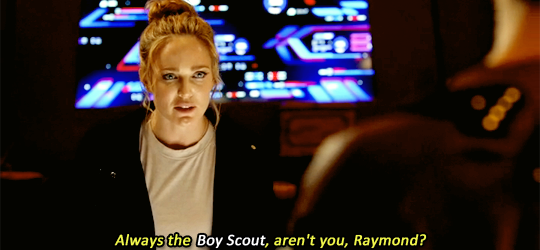
<style>
.page{position:relative;width:540px;height:250px;background:#040400}
.page>*{position:absolute;margin:0}
.t1{font:16px "Calibri";color:#f1f74b;font-weight:bold;font-style:italic}
.t2{font:16px "Calibri";color:#ffffff;font-weight:bold;font-style:italic}
</style>
<div class="page">
<p class="t1" style="left:114px;top:233px;width:313px;height:16px">Always the  <span class="t2">Boy Scout</span>, aren't you, Raymond?</p>
</div>
